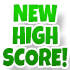
<style>
.page{position:relative;width:70px;height:70px;background:#ffffff}
.page>*{position:absolute;margin:0}
.t1{font:25px/22px "LuckiestGuy-Regular";text-transform:uppercase;scale:0.85 1}
</style>
<div class="page">
<p class="t1" style="left:3px;top:4px;width:65px;height:63px;text-align:center">New<br>High<br>Score!</p>
</div>
